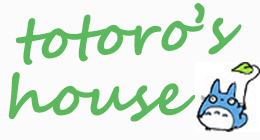
<style>
.page{position:relative;width:260px;height:140px;background:#fbfbfc}
.page>*{position:absolute;margin:0}
.t1{font:59px "SegoeScript-Bold";color:#5cb85c}
</style>
<div class="page">
<p class="t1" style="left:15px;top:3px;width:227px;height:62px;rotate:-4deg">totoro’s</p>
<p class="t1" style="left:8px;top:72px;width:188px;height:50px">house</p>
</div>
